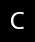
<style>
.page{position:relative;width:35px;height:42px;background:#000000}
.page>*{position:absolute;margin:0}
.t1{font:25px "MyriadPro-Regular";color:#ffffff}
</style>
<div class="page">
<p class="t1" style="left:11px;top:12px;width:13px;height:17px">C</p>
</div>
